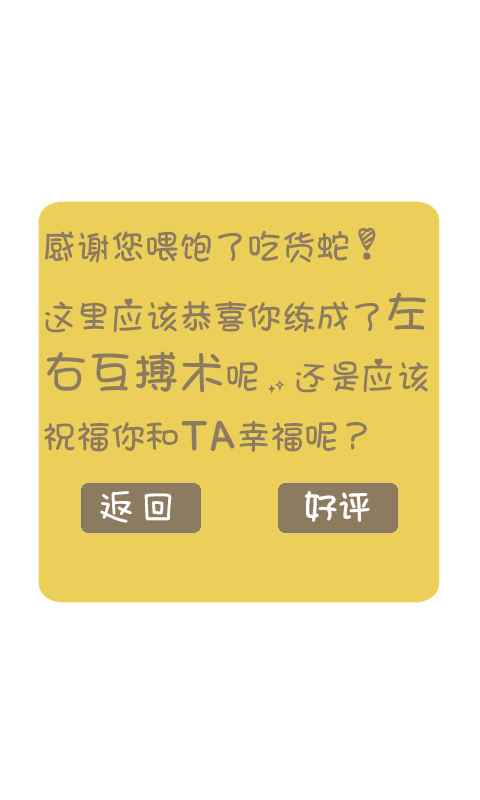
<style>
.page{position:relative;width:480px;height:800px;background:#ffffff}
.page>*{position:absolute;margin:0}
.t1{font:36px/60px "STHeitiTC-Light";color:#8c7b5f}
.t2{font:48px/60px "STHeitiTC-Light";color:#8c7b5f}
.t3{font:42px "FZMWJW--GB1-0";color:#ffffff}
</style>
<div class="page">
<p class="t1" style="left:44px;top:227px;width:385px;height:225px">感谢您喂饱了吃货蛇！<br>这里应该恭喜你练成了<span class="t2">左右互搏术</span>呢，还是应该祝福你和<span class="t2">TA</span>幸福呢？</p>
<p class="t3" style="left:100px;top:491px;width:72px;height:32px">返回</p>
</div>
